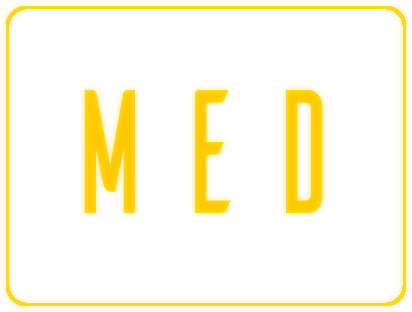
<style>
.page{position:relative;width:412px;height:312px;background:#ffffff}
.page>*{position:absolute;margin:0}
.t1{font:176px "Ailerons-Regular";color:#ffc900;scale:0.91 1}
</style>
<div class="page">
<p class="t1" style="left:84px;top:90px;width:239px;height:124px">med</p>
</div>
